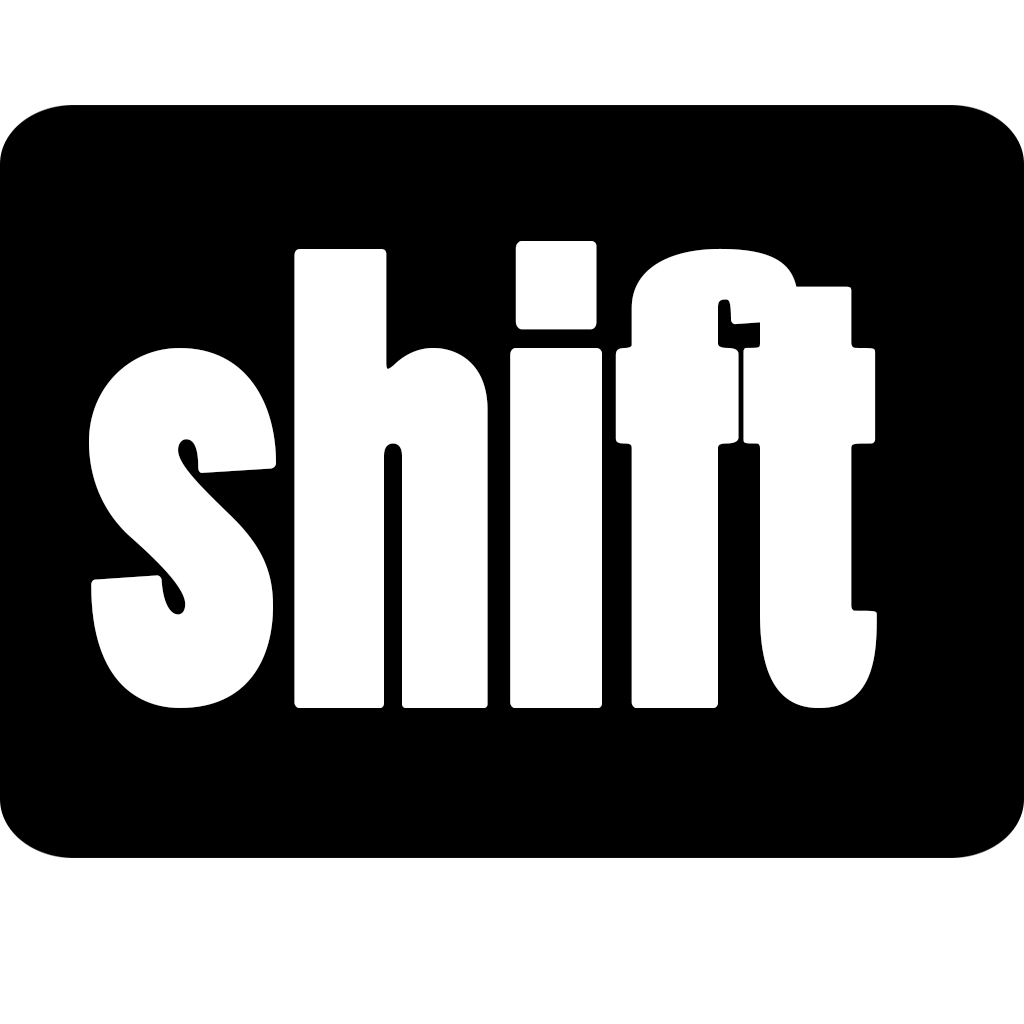
<style>
.page{position:relative;width:1024px;height:1024px;background:#ffffff}
.page>*{position:absolute;margin:0}
.t1{font:600px "PoplarStd";color:#ffffff;scale:0.94 1}
</style>
<div class="page">
<p class="t1" style="left:89px;top:241px;width:788px;height:467px">shift</p>
</div>
